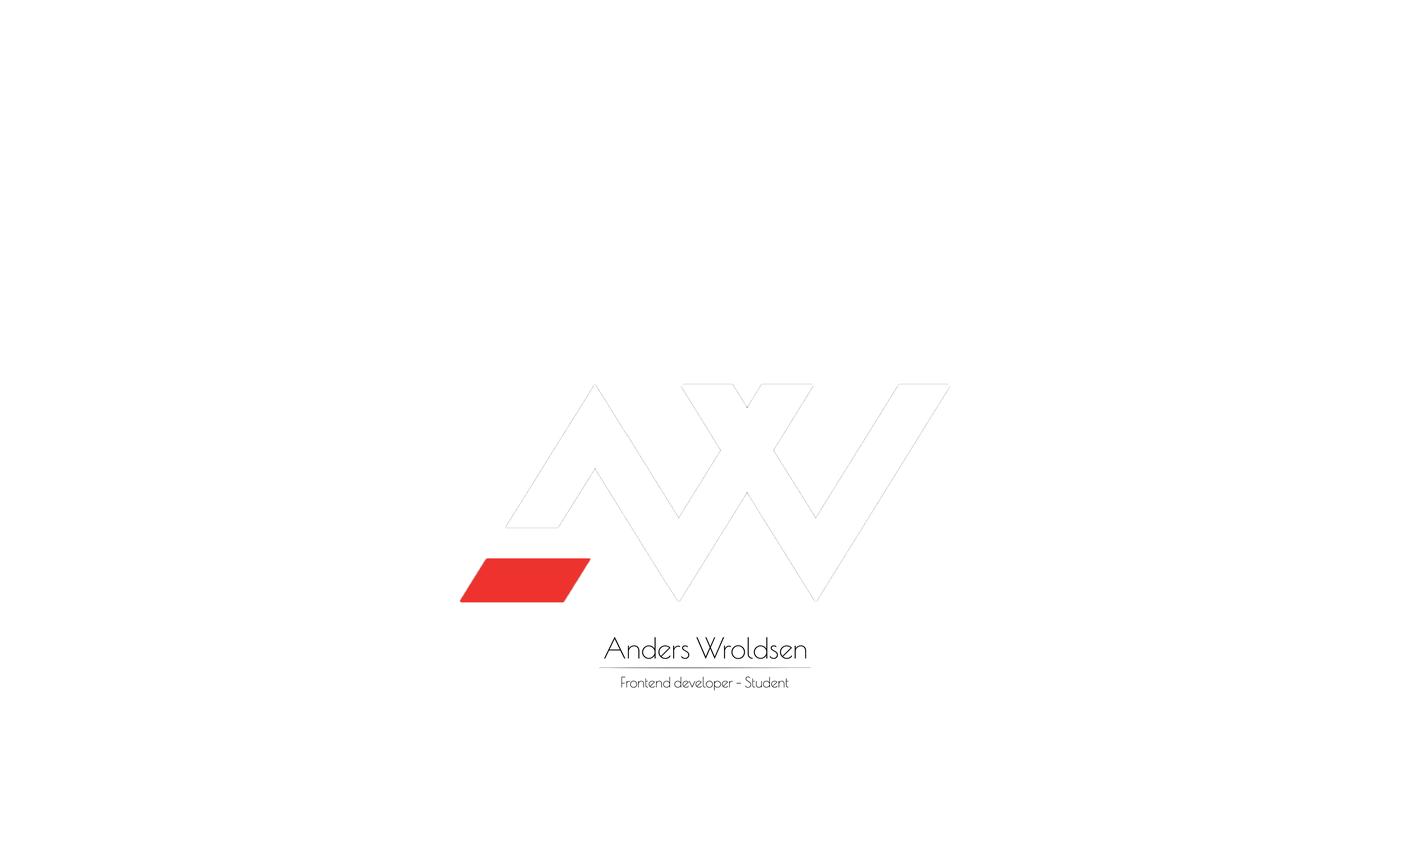
<style>
.page{position:relative;width:1410px;height:846px;background:#ffffff}
.page>*{position:absolute;margin:0}
.t1{font:28.2px "PoiretOne-Regular";color:#000000}
.t2{font:14.1px "PoiretOne-Regular";color:#000000}
</style>
<div class="page">
<p class="t1" style="left:604px;top:637px;width:202px;height:22px">Anders Wroldsen</p>
<p class="t2" style="left:621px;top:676px;width:167px;height:14px">Frontend developer - Student</p>
</div>
